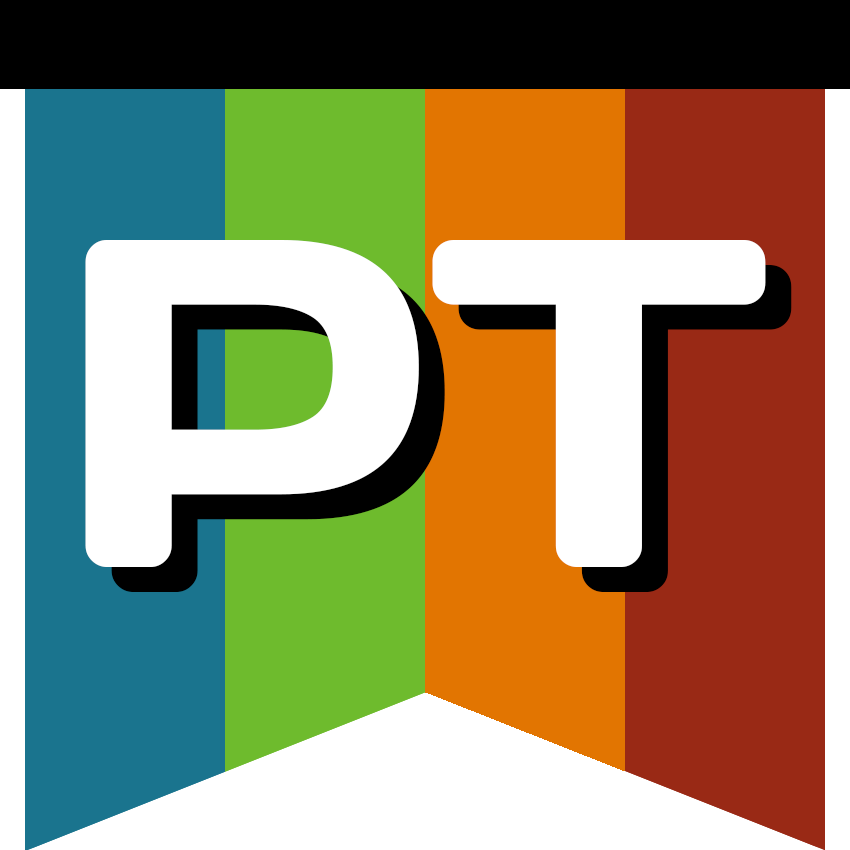
<style>
.page{position:relative;width:850px;height:850px;background:#ffffff}
.page>*{position:absolute;margin:0}
.t1{font:466.7px "DaysOne-Regular";color:#ffffff}
.t2{font:466.7px "DaysOne-Regular"}
</style>
<div class="page">
<p class="t1" style="left:85px;top:240px;width:681px;height:327px">PT</p>
<p class="t2" style="left:111px;top:265px;width:681px;height:327px">PT</p>
</div>
